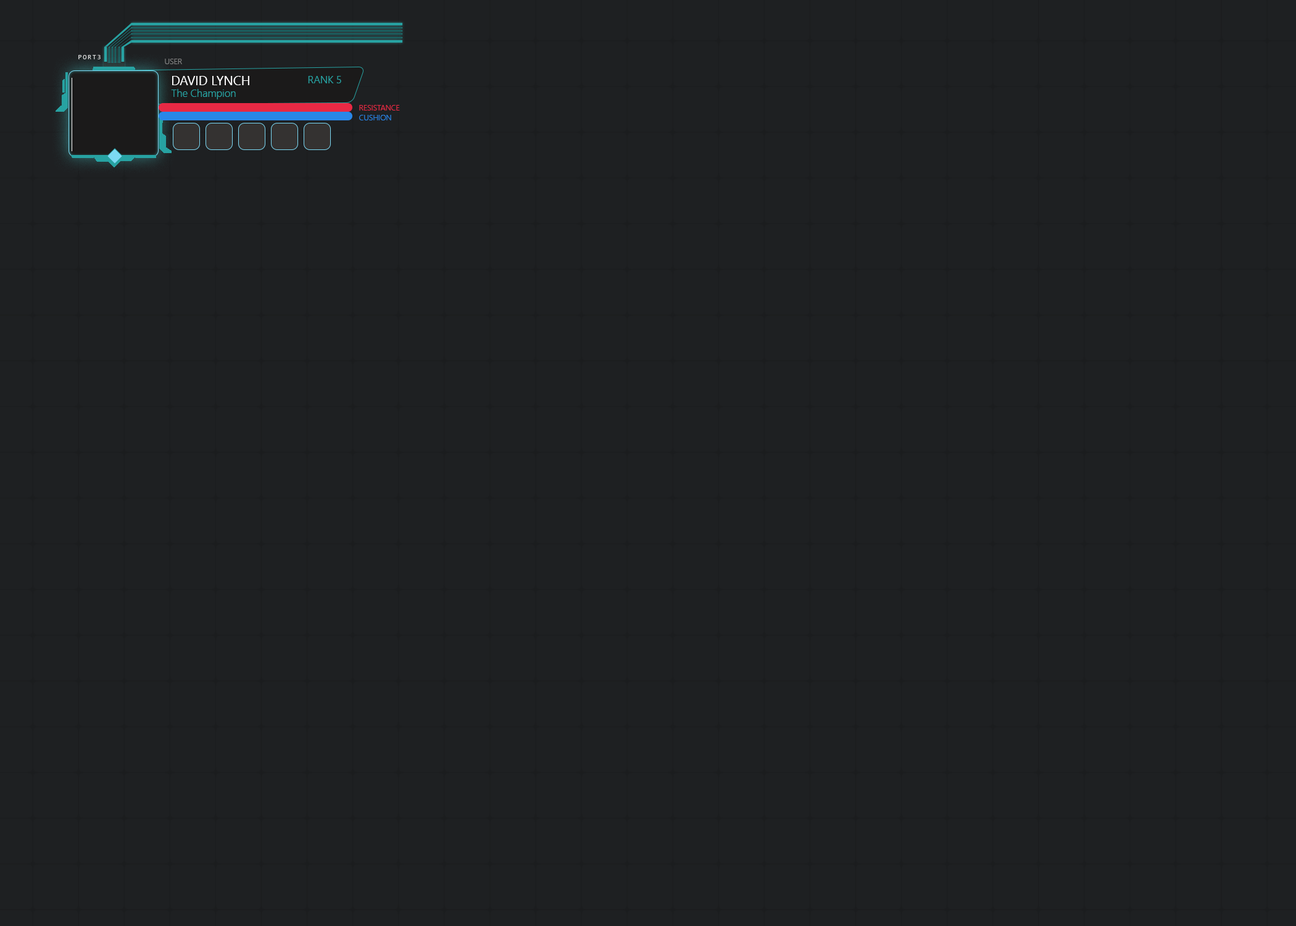
<style>
.page{position:relative;width:1296px;height:926px;background:#1e2022}
.page>*{position:absolute;margin:0}
.t1{font:7.7px "SegoeUI-Semilight";color:#838383}
.t2{font:12.9px "SegoeUI";color:#ffffff}
.t3{font:10.3px "SegoeUI-Semilight";color:#27a2a2}
.t4{font:7.7px "SegoeUI-Semilight";color:#e82944}
.t5{font:7.7px "SegoeUI-Semilight";color:#2987e8}
</style>
<div class="page">
<p class="t1" style="left:165px;top:59px;width:17px;height:5px">USER</p>
<p class="t2" style="left:172px;top:76px;width:77px;height:9px">DAVID LYNCH</p>
<p class="t3" style="left:308px;top:76px;width:33px;height:7px">RANK 5</p>
<p class="t3" style="left:171px;top:89px;width:65px;height:10px">The Champion</p>
<p class="t4" style="left:359px;top:105px;width:41px;height:5px">RESISTANCE</p>
<p class="t5" style="left:359px;top:115px;width:32px;height:5px">CUSHION</p>
</div>
